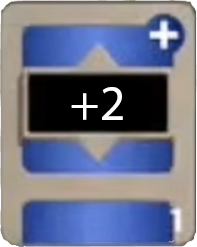
<style>
.page{position:relative;width:197px;height:247px}
.page>*{position:absolute;margin:0}
.t1{font:50px "MyriadPro-Regular";color:#ffffff}
</style>
<div class="page">
<p class="t1" style="left:71px;top:87px;width:52px;height:33px">+2</p>
</div>
